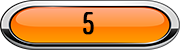
<style>
.page{position:relative;width:180px;height:50px}
.page>*{position:absolute;margin:0}
.t1{font:36px "FCGalaxyRegular";color:#000000;font-weight:bold}
</style>
<div class="page">
<p class="t1" style="left:83px;top:12px;width:11px;height:23px">5</p>
</div>
